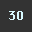
<style>
.page{position:relative;width:32px;height:32px;background:#333333}
.page>*{position:absolute;margin:0}
.t1{font:12.4px "ChicagoFLF";color:#d7f9ff}
</style>
<div class="page">
<p class="t1" style="left:9px;top:11px;width:14px;height:9px">30</p>
</div>
